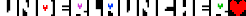
<style>
.page{position:relative;width:246px;height:16px;background:#ffffff}
.page>*{position:absolute;margin:0}
.t1{font:17px "MonsterFriendBack";color:#ffffff}
.t2{font:17.5px "MonsterFriendBack";letter-spacing:0.02em;color:#ffffff}
.t3{font:17px "MonsterFriendBack";letter-spacing:0.02em;color:#ffffff}
.t4{font:17px "MonsterFriendBack";letter-spacing:0.06em;color:#ffffff}
.t5{font:17.5px "MonsterFriendBack";color:#ffffff}
</style>
<div class="page">
<p class="t1" style="left:0px;top:0px;width:228px;height:16px">UND<span class="t2">E</span>RLAU<span class="t3">N</span><span class="t4">CH</span><span class="t5">E</span>R</p>
</div>
